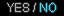
<style>
.page{position:relative;width:64px;height:16px;background:#000000}
.page>*{position:absolute;margin:0}
.t1{font:12px "ArialMT";color:#afafaf}
.t2{font:12px "ArialMT";color:#5dccdd}
</style>
<div class="page">
<p class="t1" style="left:7px;top:3px;width:22px;height:9px">YES</p>
<p class="t1" style="left:33px;top:3px;width:3px;height:9px">/</p>
<p class="t2" style="left:40px;top:3px;width:16px;height:9px">NO</p>
</div>
